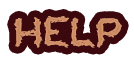
<style>
.page{position:relative;width:134px;height:66px;background:#ffffff}
.page>*{position:absolute;margin:0}
.t1{font:40px "TOBACCO";color:#c4845a;font-weight:bold}
</style>
<div class="page">
<p class="t1" style="left:14px;top:16px;width:108px;height:32px">HELP</p>
</div>
